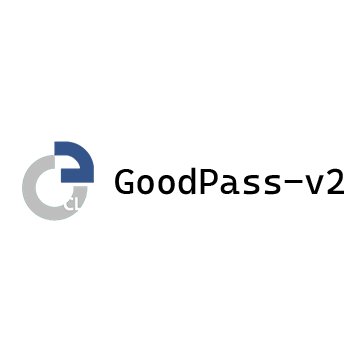
<style>
.page{position:relative;width:360px;height:360px;background:#ffffff}
.page>*{position:absolute;margin:0}
.t1{font:36px "CascadiaCode-Roman";color:#000000}
</style>
<div class="page">
<p class="t1" style="left:115px;top:167px;width:229px;height:28px">GoodPass-v2</p>
</div>
